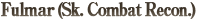
<style>
.page{position:relative;width:199px;height:19px;background:#ffffff}
.page>*{position:absolute;margin:0}
.t1{font:18px "RyuminPro-ExBold";letter-spacing:-0.08em;color:#4a3f32;font-weight:bold;scale:0.9 1}
</style>
<div class="page">
<p class="t1" style="left:1px;top:2px;width:195px;height:18px">Fulmar (Sk. Combat Recon.)</p>
</div>
